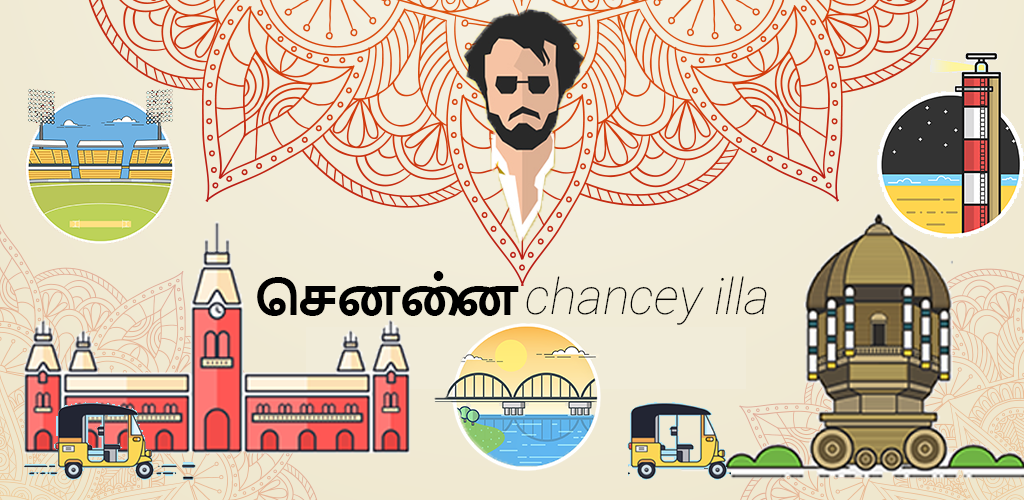
<style>
.page{position:relative;width:1024px;height:500px}
.page>*{position:absolute;margin:0}
.t1{font:50px "NirmalaUI-Bold";letter-spacing:-0.075em;color:#000000}
.t2{font:50px "Roboto-ThinItalic";color:#000000}
</style>
<div class="page">
<p class="t1" style="left:257px;top:271px;width:262px;height:45px">ெசனை்ன</p>
<p class="t2" style="left:526px;top:276px;width:241px;height:49px">chancey illa</p>
</div>
